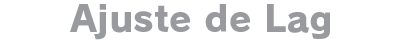
<style>
.page{position:relative;width:400px;height:40px;background:#ffffff}
.page>*{position:absolute;margin:0}
.t1{font:36px "RodinPro-EB";letter-spacing:0.003em;color:#989a9d}
</style>
<div class="page">
<p class="t1" style="left:70px;top:4px;width:260px;height:36px">Ajuste de Lag</p>
</div>
